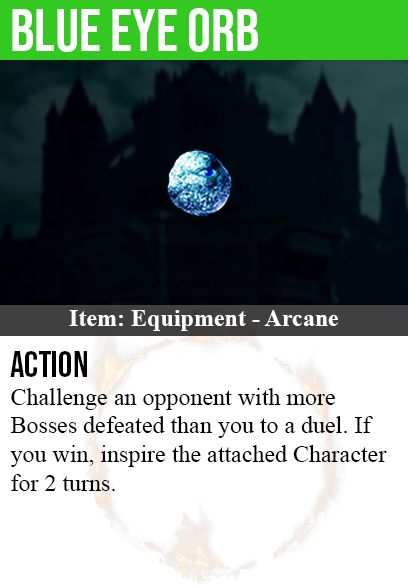
<style>
.page{position:relative;width:408px;height:585px;background:#ffffff}
.page>*{position:absolute;margin:0}
.t1{font:60px "BebasNeue-Regular";color:#ffffff}
.t2{font:24px "TimesNewRomanPS-BoldMT";color:#ffffff}
.t3{font:36px "BebasNeue-Regular";color:#000000}
.t4{font:24px "TimesNewRomanPSMT";color:#000000}
</style>
<div class="page">
<p class="t1" style="left:12px;top:8px;width:246px;height:44px">blue eye orb</p>
<p class="t2" style="left:69px;top:310px;width:269px;height:21px">Item: Equipment - Arcane</p>
<p class="t3" style="left:10px;top:351px;width:77px;height:26px">action</p>
<p class="t4" style="left:10px;top:388px;width:377px;height:103px">Challenge an opponent with more<br>Bosses defeated than you to a duel. If<br>you win, inspire the attached Character<br>for 2 turns.</p>
</div>
